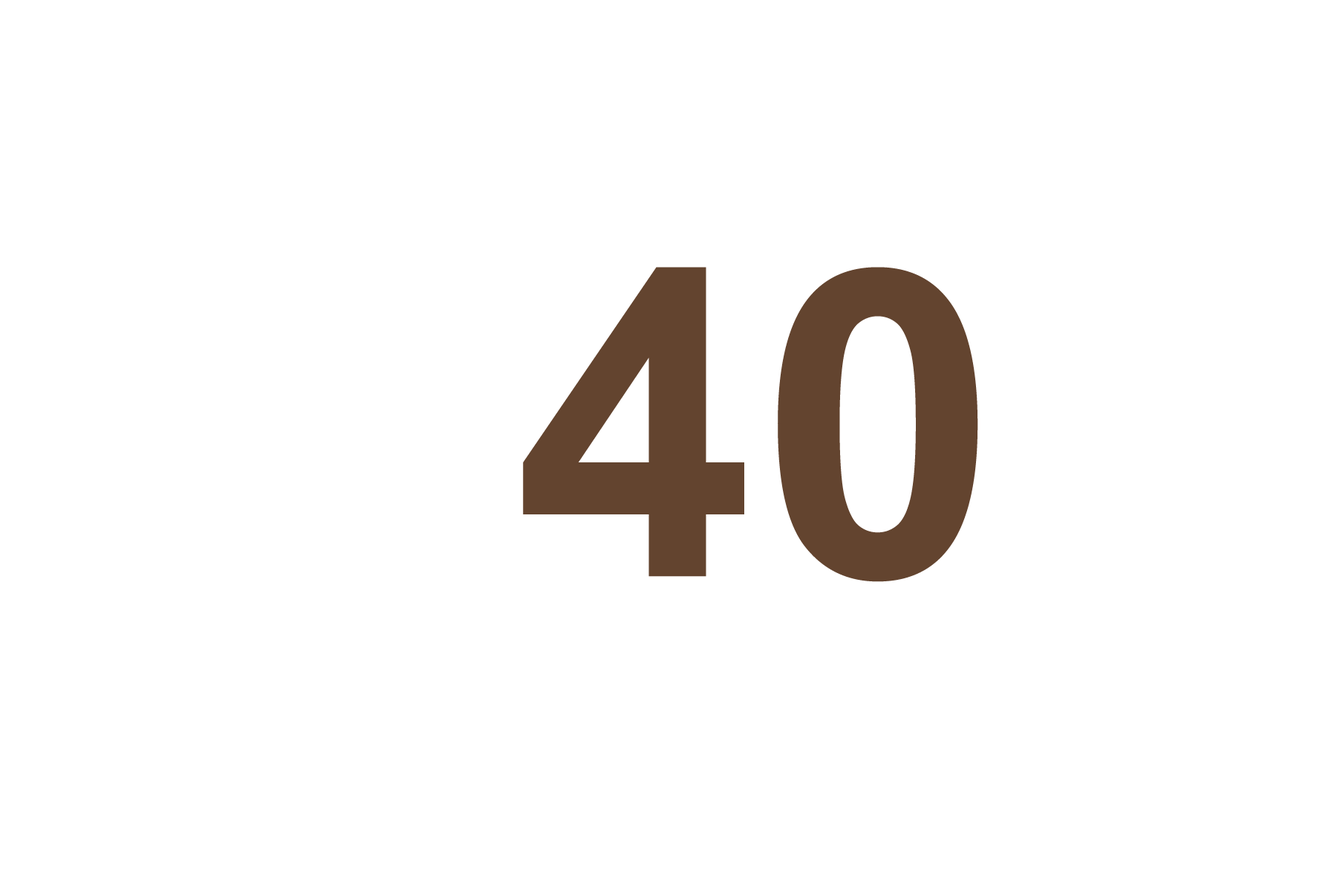
<style>
.page{position:relative;width:1337px;height:892px;background:#ffffff}
.page>*{position:absolute;margin:0}
.t1{font:429.6px "Arial-BoldMT";color:#63442f}
</style>
<div class="page">
<p class="t1" style="left:523px;top:267px;width:456px;height:315px">40</p>
</div>
